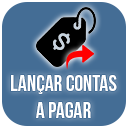
<style>
.page{position:relative;width:128px;height:128px;background:#446d95}
.page>*{position:absolute;margin:0}
.t1{font:22px "BebasNeue";color:#ffffff}
</style>
<div class="page">
<p class="t1" style="left:11px;top:75px;width:106px;height:43px;text-align:center">Lançar contas a pagar</p>
</div>
